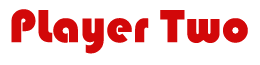
<style>
.page{position:relative;width:260px;height:65px;background:#ffffff}
.page>*{position:absolute;margin:0}
.t1{font:48px "Bauhaus93";color:#d20809}
</style>
<div class="page">
<p class="t1" style="left:11px;top:9px;width:237px;height:45px">PLayer Two</p>
</div>
